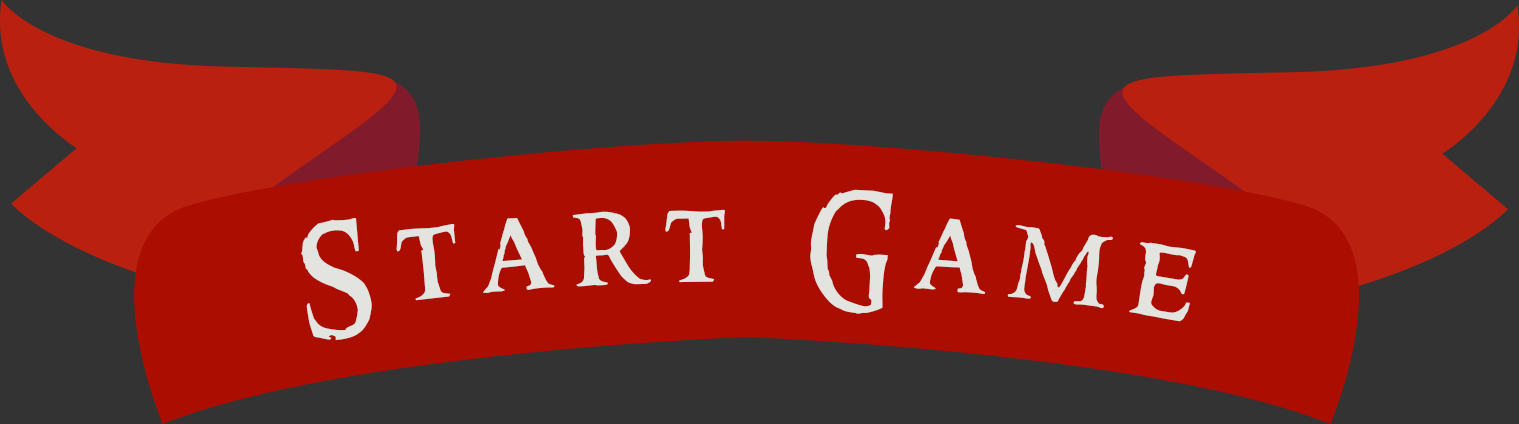
<style>
.page{position:relative;width:1519px;height:424px;background:#333333}
.page>*{position:absolute;margin:0}
.t1{font:116px "RingbearerMedium";letter-spacing:0.2em;color:#e3e3e0;font-weight:bold}
</style>
<div class="page">
<p class="t1" style="left:301px;top:189px;width:895px;height:151px;rotate:1deg">Start Game</p>
</div>
